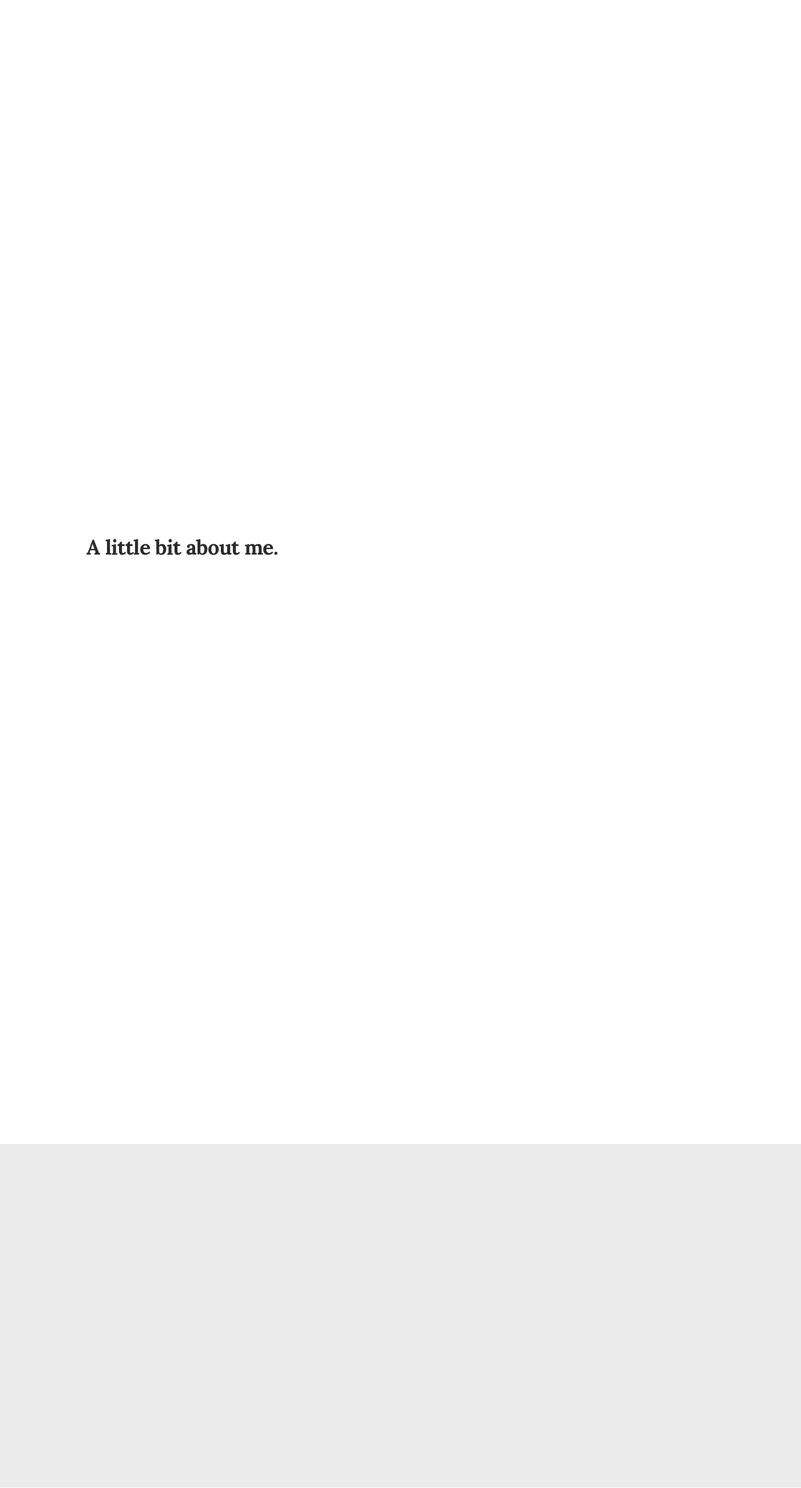
<style>
.page{position:relative;width:801px;height:1488px;background:#ffffff}
.page>*{position:absolute;margin:0}
.t1{font:20.6px "Lora-Bold";letter-spacing:-0.02em;color:#2b2b2b}
</style>
<div class="page">
<p class="t1" style="left:86px;top:539px;width:192px;height:16px">A little bit about me.</p>
</div>
